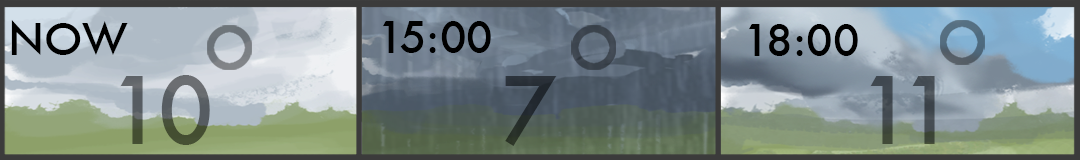
<style>
.page{position:relative;width:1080px;height:160px}
.page>*{position:absolute;margin:0}
.t1{font:43.2px "Futura-Medium";color:#000000}
.t2{font:90px "Futura-Medium"}
</style>
<div class="page">
<p class="t1" style="left:11px;top:20px;width:117px;height:35px">NOW</p>
<p class="t1" style="left:383px;top:21px;width:108px;height:32px">15:00</p>
<p class="t1" style="left:749px;top:24px;width:109px;height:32px">18:00</p>
<p class="t2" style="left:120px;top:75px;width:815px;height:71px">10         7          11</p>
</div>
